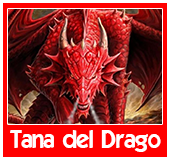
<style>
.page{position:relative;width:170px;height:160px;background:#ff0000}
.page>*{position:absolute;margin:0}
.t1{font:24px "ELEGANCE";color:#ffffff}
</style>
<div class="page">
<p class="t1" style="left:10px;top:130px;width:151px;height:22px">Tana del Drago</p>
</div>
